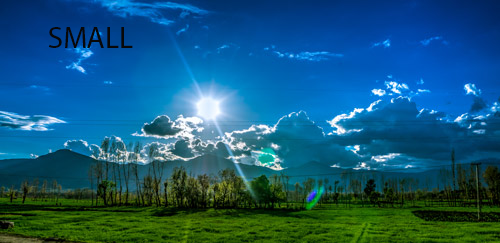
<style>
.page{position:relative;width:500px;height:243px}
.page>*{position:absolute;margin:0}
.t1{font:30px "MyriadPro-Regular";color:#080808}
</style>
<div class="page">
<p class="t1" style="left:48px;top:27px;width:85px;height:21px">SMALL</p>
</div>
